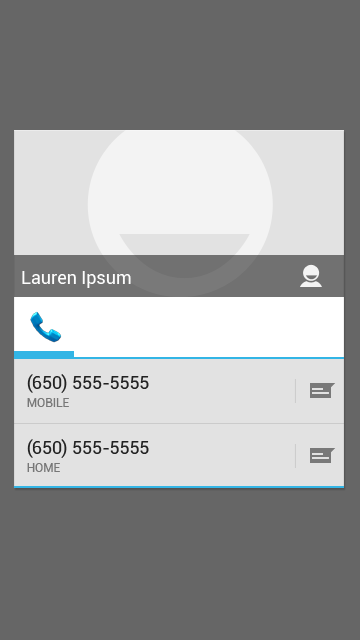
<style>
.page{position:relative;width:360px;height:640px;background:#666666}
.page>*{position:absolute;margin:0}
.t1{font:18px "Roboto-Regular";color:#fefefe}
.t2{font:18px/18px "Roboto-Regular";color:#222222}
.t3{font:12px/18px "Roboto-Regular";color:#777777}
</style>
<div class="page">
<p class="t1" style="left:22px;top:271px;width:109px;height:17px">Lauren Ipsum</p>
<p class="t2" style="left:27px;top:374px;width:122px;height:33px">(650) 555-5555<br><span class="t3">MOBILE</span></p>
<p class="t2" style="left:27px;top:439px;width:122px;height:33px">(650) 555-5555<br><span class="t3">HOME</span></p>
</div>
